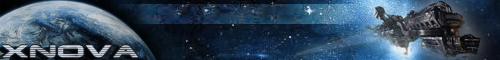
<style>
.page{position:relative;width:500px;height:60px}
.page>*{position:absolute;margin:0}
.t1{font:16px "TerminatorCyr4-Semi-expandedBold";font-weight:bold;scale:1.5 1}
</style>
<div class="page">
<p class="t1" style="left:2px;top:45px;width:136px;height:13px">Xnova</p>
</div>
